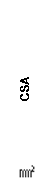
<style>
.page{position:relative;width:50px;height:180px;background:#ffffff}
.page>*{position:absolute;margin:0}
.t1{font:12px "Gulim";color:#000000;font-weight:bold;scale:0.95 1}
</style>
<div class="page">
<p class="t1" style="left:20px;top:77px;width:9px;height:24px;rotate:180deg">CSA</p>
</div>
